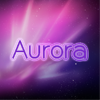
<style>
.page{position:relative;width:100px;height:100px}
.page>*{position:absolute;margin:0}
.t1{font:24px "Coamei-Regular";color:#7626c8}
</style>
<div class="page">
<p class="t1" style="left:12px;top:40px;width:74px;height:19px">Aurora</p>
</div>
